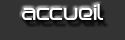
<style>
.page{position:relative;width:125px;height:40px;background:#333333}
.page>*{position:absolute;margin:0}
.t1{font:20px "BirdmanBold";color:#ffffff}
</style>
<div class="page">
<p class="t1" style="left:22px;top:4px;width:82px;height:16px">accueil</p>
</div>
